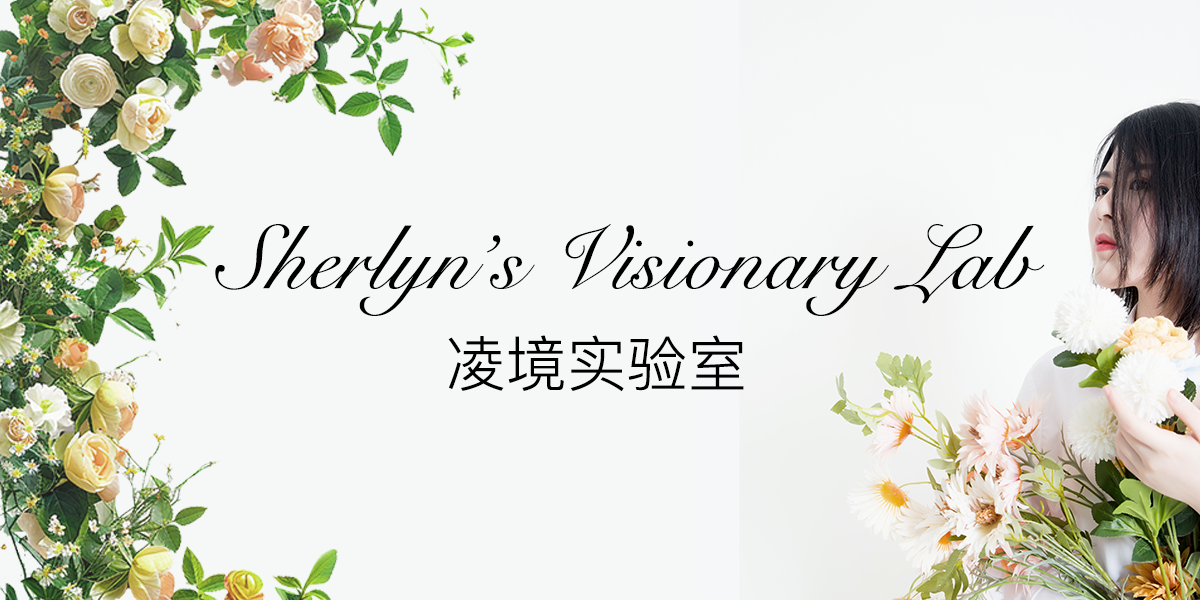
<style>
.page{position:relative;width:1200px;height:600px;background:#f6f8f7}
.page>*{position:absolute;margin:0}
.t1{font:90px "SnellRoundhand";letter-spacing:0.008em;color:#000000}
.t2{font:60px "PingFangTC-Light";letter-spacing:0.008em;color:#000000}
</style>
<div class="page">
<p class="t1" style="left:215px;top:224px;width:830px;height:92px">Sherlyn’s Visionary Lab</p>
<p class="t2" style="left:448px;top:335px;width:296px;height:57px">凌境实验室</p>
</div>
